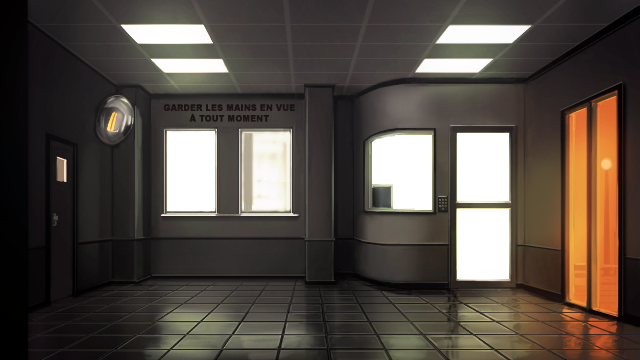
<style>
.page{position:relative;width:640px;height:360px}
.page>*{position:absolute;margin:0}
.t1{font:9px "Arial-Black";color:#271d1c;font-weight:bold;scale:0.9 1}
</style>
<div class="page">
<p class="t1" style="left:163px;top:104px;width:132px;height:18px;text-align:center">GARDER LES MAINS EN VUE<br>À TOUT MOMENT</p>
</div>
